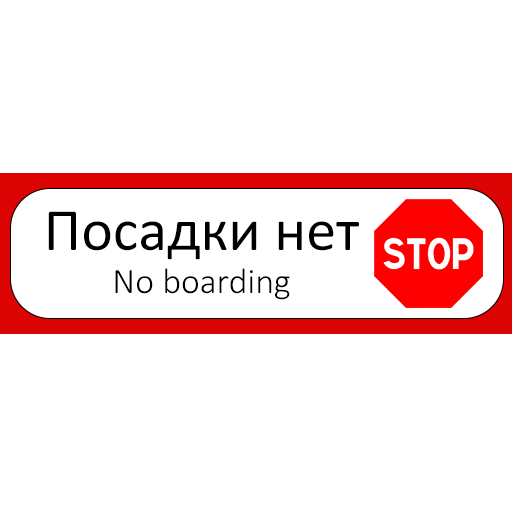
<style>
.page{position:relative;width:512px;height:512px;background:#ffffff}
.page>*{position:absolute;margin:0}
.t1{font:60px "Calibri";color:#000000}
.t2{font:36px "Calibri-Light";color:#000000}
</style>
<div class="page">
<p class="t1" style="left:48px;top:211px;width:311px;height:89px;text-align:center">Посадки нет<br><span class="t2">No boarding</span></p>
</div>
